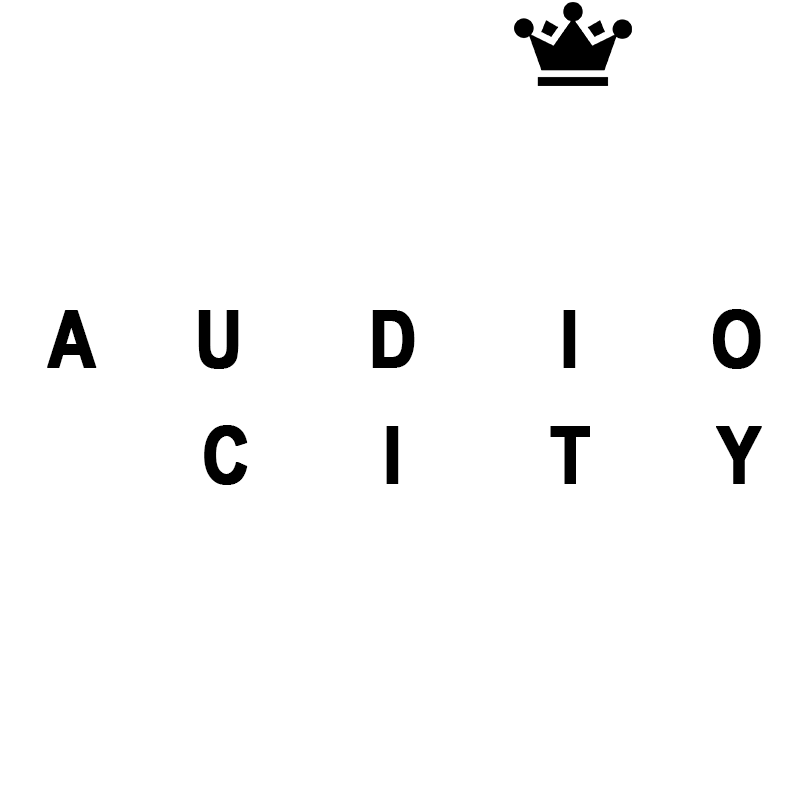
<style>
.page{position:relative;width:800px;height:800px;background:#ffffff}
.page>*{position:absolute;margin:0}
.t1{font:80px "ArialNarrow-Bold";letter-spacing:1.22em;color:#000000;font-weight:bold}
.t2{font:80px "ArialNarrow-Bold";letter-spacing:1.56em;color:#000000;font-weight:bold}
.t3{font:80px "ArialNarrow-Bold";letter-spacing:1.76em;color:#000000;font-weight:bold}
.t4{font:80px "ArialNarrow-Bold";letter-spacing:1.64em;color:#000000;font-weight:bold}
.t5{font:80px "ArialNarrow-Bold";letter-spacing:1.84em;color:#000000;font-weight:bold}
</style>
<div class="page">
<p class="t1" style="left:47px;top:309px;width:714px;height:60px">A<span class="t2">U</span><span class="t3">D</span><span class="t4">I</span><span class="t2">O</span></p>
<p class="t4" style="left:204px;top:425px;width:558px;height:60px">C<span class="t5">I</span><span class="t2">T</span>Y</p>
</div>
